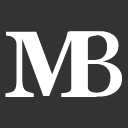
<style>
.page{position:relative;width:128px;height:128px;background:#333333}
.page>*{position:absolute;margin:0}
.t1{font:94px "Vani-Bold";color:#ffffff}
.t2{font:94px "Vani";color:#ffffff}
</style>
<div class="page">
<p class="t1" style="left:5px;top:31px;width:92px;height:66px">M</p>
<p class="t2" style="left:68px;top:31px;width:54px;height:66px">B</p>
</div>
